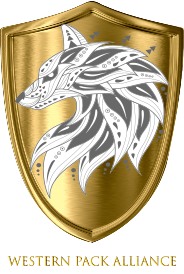
<style>
.page{position:relative;width:184px;height:274px;background:#ffffff}
.page>*{position:absolute;margin:0}
.t1{font:12px "TrajanColor-Concept"}
</style>
<div class="page">
<p class="t1" style="left:7px;top:256px;width:169px;height:10px">WESTERN PACK ALLIANCE</p>
</div>
